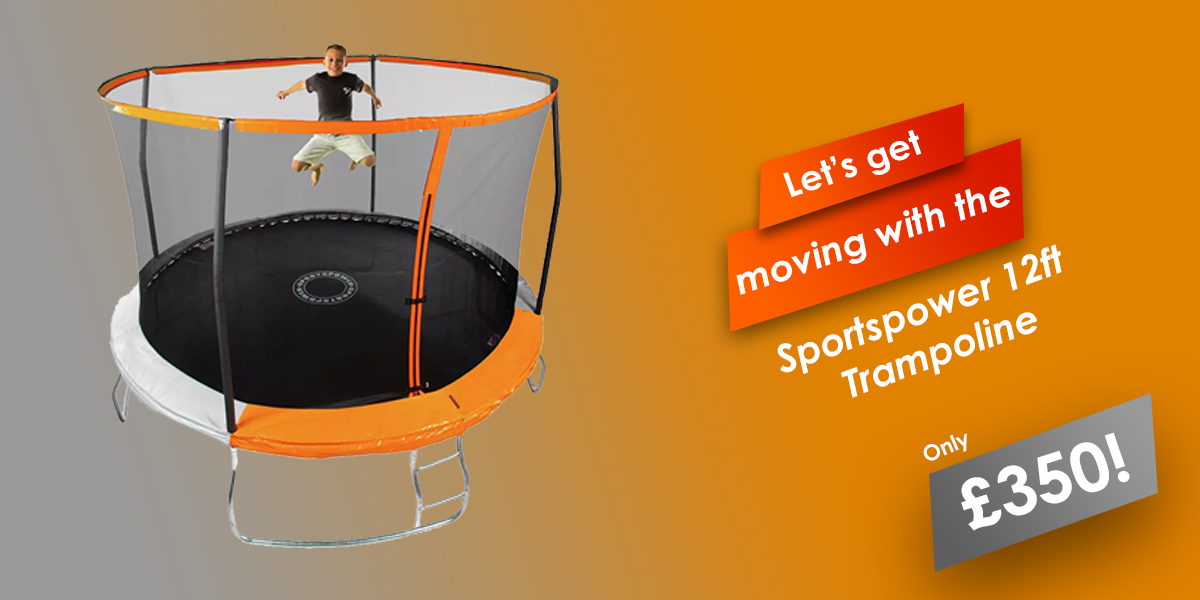
<style>
.page{position:relative;width:1200px;height:600px}
.page>*{position:absolute;margin:0}
.t1{font:34.5px "CenturyGothic-Bold";color:#ffffff;scale:1.03 1}
.t2{font:36.5px "CenturyGothic-BoldItalic";color:#ffffff;scale:1.03 1}
.t3{font:38.3px "CenturyGothic-BoldItalic";color:#ffffff}
.t4{font:21.6px "CenturyGothic-Bold";color:#ffffff}
.t5{font:67.3px "CenturyGothic-Bold";color:#ffffff}
</style>
<div class="page">
<p class="t1" style="left:783px;top:130px;width:139px;height:67px;rotate:-19deg">Let’s get</p>
<p class="t2" style="left:736px;top:186px;width:274px;height:109px;rotate:-19deg">moving with the</p>
<p class="t3" style="left:777px;top:244px;width:285px;height:154px;text-align:center;rotate:-20deg">Sportspower 12ft <br>Trampoline</p>
<p class="t4" style="left:923px;top:433px;width:44px;height:28px;rotate:-23deg">Only</p>
<p class="t5" style="left:961px;top:432px;width:169px;height:99px;rotate:-18deg">£350!</p>
</div>
